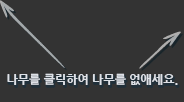
<style>
.page{position:relative;width:184px;height:102px;background:#333333}
.page>*{position:absolute;margin:0}
.t1{font:12px "NanumGothicExtraBold";color:#dee1e7}
</style>
<div class="page">
<p class="t1" style="left:7px;top:73px;width:171px;height:12px">나무를 클릭하여 나무를 없애세요.</p>
</div>
